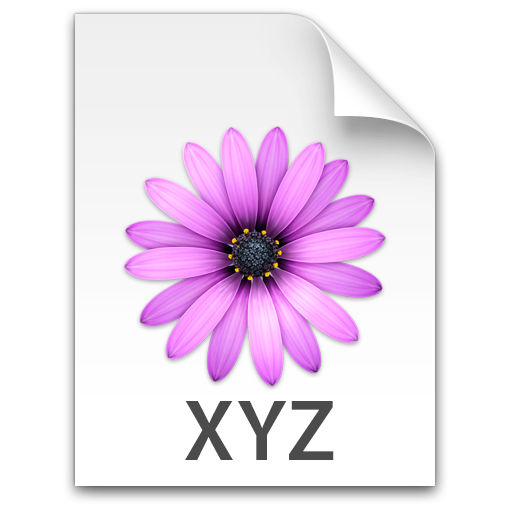
<style>
.page{position:relative;width:512px;height:512px;background:#ffffff}
.page>*{position:absolute;margin:0}
.t1{font:86.8px "MyriadPro-Semibold";letter-spacing:0.02em;color:#4b4b4b}
</style>
<div class="page">
<p class="t1" style="left:185px;top:401px;width:149px;height:59px">XYZ</p>
</div>
